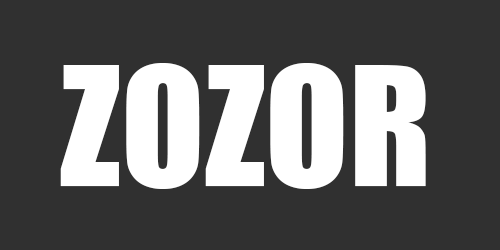
<style>
.page{position:relative;width:500px;height:250px;background:#303030}
.page>*{position:absolute;margin:0}
.t1{font:153.4px "Impact";color:#ffffff}
</style>
<div class="page">
<p class="t1" style="left:60px;top:63px;width:366px;height:126px">ZOZOR</p>
</div>
